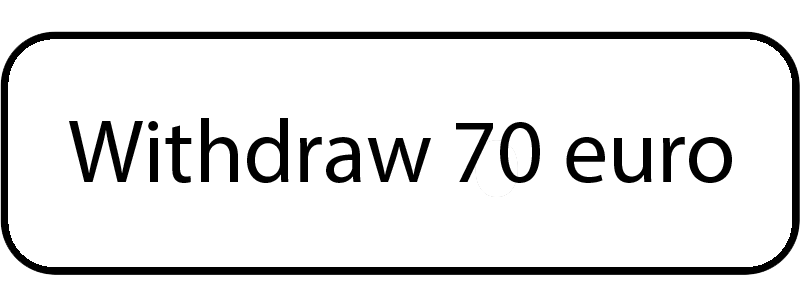
<style>
.page{position:relative;width:800px;height:300px;background:#ffffff}
.page>*{position:absolute;margin:0}
.t1{font:90px "MyriadPro-Regular";color:#000000}
</style>
<div class="page">
<p class="t1" style="left:69px;top:118px;width:663px;height:65px">Withdraw 70 euro</p>
</div>
